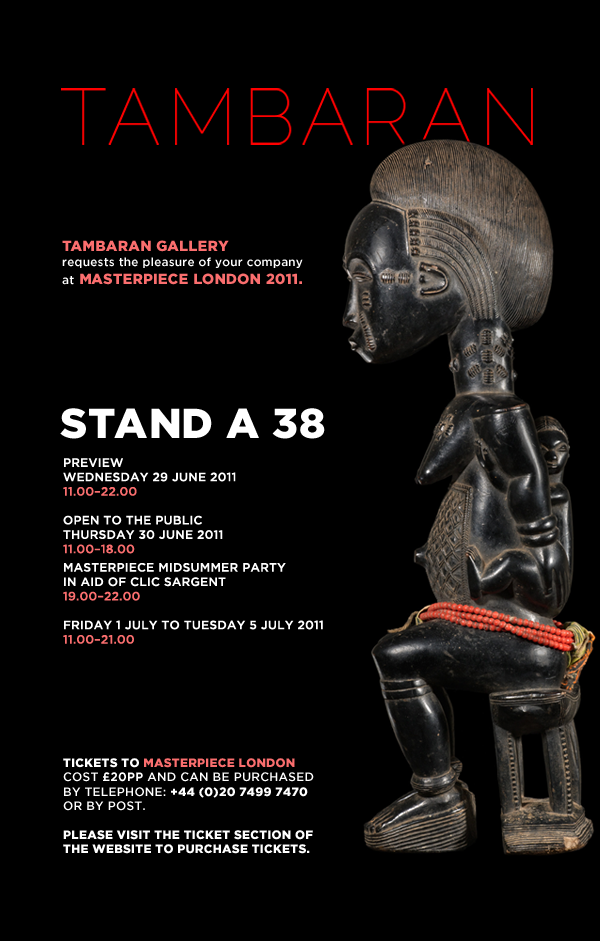
<style>
.page{position:relative;width:600px;height:941px;background:#000000}
.page>*{position:absolute;margin:0}
.t1{font:11.8px/14.6px "GothamHTF-Medium";letter-spacing:0.02em;color:#ffffff}
.t2{font:14.5px/17.7px "GothamHTF-Black";letter-spacing:0.02em;color:#fa6e6e;text-transform:uppercase}
.t3{font:14.5px/17.7px "GothamHTF-Book";letter-spacing:0.02em;color:#fa6e6e;text-transform:uppercase}
.t4{font:11.8px/17.7px "GothamHTF-Medium";letter-spacing:0.02em;color:#ffffff}
.t5{font:41.8px "GothamHTF-Black";letter-spacing:0.02em;color:#ffffff;text-transform:uppercase}
.t6{font:12px "GothamHTF-Medium";letter-spacing:0.02em;color:#ffffff;text-transform:uppercase}
.t7{font:12px "GothamHTF-Medium";letter-spacing:0.02em;color:#fa6e6e;text-transform:uppercase}
.t8{font:12px "GothamHTF-Black";letter-spacing:0.02em;color:#ffffff;text-transform:uppercase}
.t9{font:12px "GothamHTF-Black";letter-spacing:0.02em;color:#fa6e6e;text-transform:uppercase}
.t10{font:12px "GothamHTF-Bold";letter-spacing:0.02em;color:#ffffff;text-transform:uppercase}
</style>
<div class="page">
<p class="t1" style="left:62px;top:240px;width:241px;height:45px"><span class="t2">Tambaran Gallery</span><span class="t3"> <br></span>requests the pleasure of your company <br><span class="t4">at </span><span class="t2">Masterpiece London 2011.</span></p>
<p class="t5" style="left:60px;top:408px;width:265px;height:31px">STAND A 38</p>
<p class="t6" style="left:63px;top:458px;width:260px;height:186px">Preview<br>Wednesday 29 June 2011<br><span class="t7">11.00–22.00<br></span><br>Open to the public<br>Thursday 30 June 2011<br><span class="t7">11.00–18.00<br><br></span>Masterpiece Midsummer Party <br>in aid of CLIC Sargent<br><span class="t7">19.00–22.00<br></span><br>Friday 1 July to Tuesday 5 July 2011<br><span class="t7">11.00–21.00</span></p>
<p class="t8" style="left:63px;top:758px;width:251px;height:96px">Tickets to <span class="t9">Masterpiece London<br></span><span class="t6">cost </span><span class="t10">£20pp</span><span class="t6"> and can be purchased<br>by telephone: </span>+44 (0)20 7499 7470<br><span class="t6">or by post.<br></span><br>Please visit the Ticket section of <br>thE website to purchase tickets.</p>
</div>
